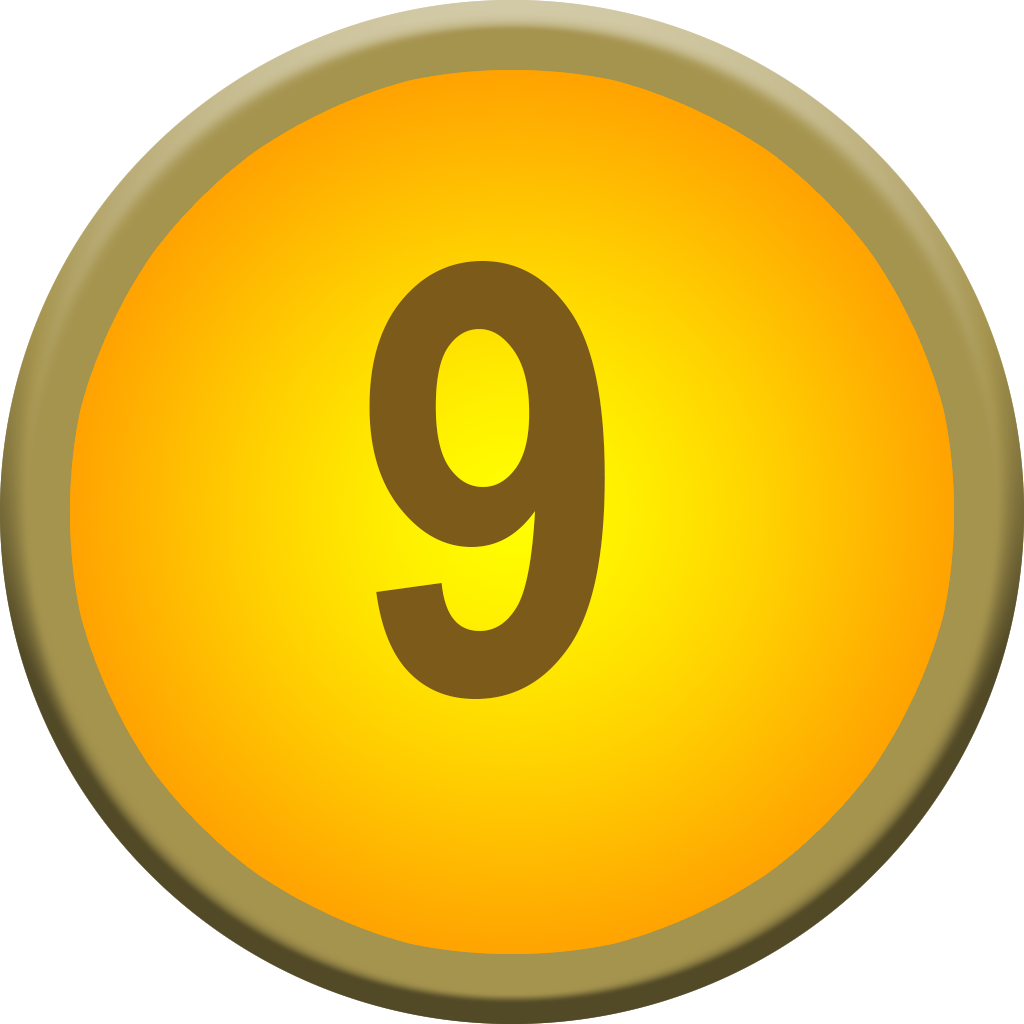
<style>
.page{position:relative;width:1024px;height:1024px;background:#ffffff}
.page>*{position:absolute;margin:0}
.t1{font:600px "ArialNarrow-Bold";color:#7c5a19}
</style>
<div class="page">
<p class="t1" style="left:369px;top:261px;width:236px;height:438px">9</p>
</div>
